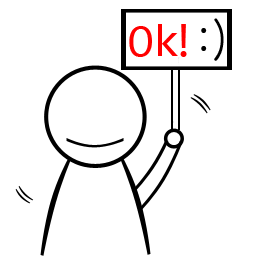
<style>
.page{position:relative;width:256px;height:256px;background:#ffffff}
.page>*{position:absolute;margin:0}
.t1{font:46px "Consolas";letter-spacing:-0.16em;color:#ff0000}
.t2{font:46px "Consolas";color:#ff0000}
.t3{font:46px "Gulim";color:#000000}
</style>
<div class="page">
<p class="t1" style="left:129px;top:18px;width:95px;height:43px"><span class="t2">O</span>k! <span class="t3">:)</span></p>
</div>
